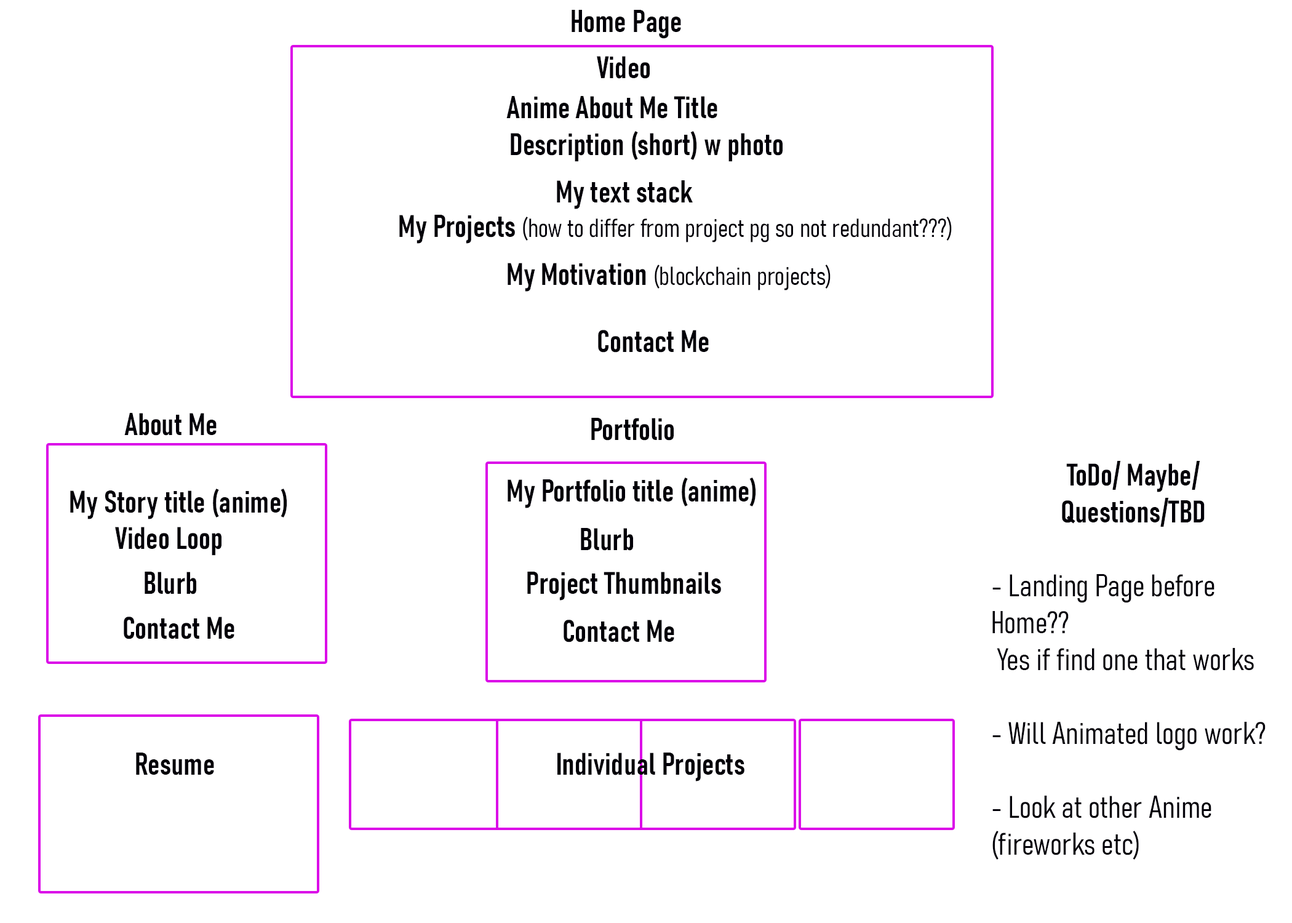
<style>
.page{position:relative;width:1292px;height:923px;background:#ffffff}
.page>*{position:absolute;margin:0}
.t1{font:30.8px "Bahnschrift-SemiBoldCondensed";color:#020008}
.t2{font:25.6px "Bahnschrift-LightCondensed";color:#020008}
.t3{font:30.8px "Bahnschrift-LightCondensed";color:#020008}
</style>
<div class="page">
<p class="t1" style="left:572px;top:10px;width:109px;height:29px">Home Page</p>
<p class="t1" style="left:597px;top:56px;width:53px;height:23px">Video</p>
<p class="t1" style="left:506px;top:96px;width:63px;height:22px">Anime</p>
<p class="t1" style="left:511px;top:96px;width:272px;height:66px;text-align:center">About Me Title<br>Description (short) w photo</p>
<p class="t1" style="left:557px;top:180px;width:136px;height:29px">My text stack</p>
<p class="t2" style="left:399px;top:215px;width:553px;height:29px"><span class="t1">My Projects </span>(how to differ from project pg so not redundant???)</p>
<p class="t2" style="left:508px;top:263px;width:323px;height:29px"><span class="t1">My Motivation </span>(blockchain projects)</p>
<p class="t1" style="left:598px;top:330px;width:111px;height:23px">Contact Me</p>
<p class="t1" style="left:124px;top:413px;width:93px;height:23px">About Me</p>
<p class="t1" style="left:591px;top:418px;width:83px;height:23px">Portfolio</p>
<p class="t3" style="left:992px;top:461px;width:274px;height:399px;text-align:center"><span class="t1">ToDo/ Maybe/ Questions/TBD<br></span><br>- Landing Page before Home??<br> Yes if find one that works<br><br>- Will Animated logo work? <br><br>- Look at other Anime (fireworks etc)<br><br>- Codeflower or blockchain charts?? What works?</p>
<p class="t1" style="left:508px;top:477px;width:248px;height:31px">My Portfolio title (anime)</p>
<p class="t1" style="left:70px;top:489px;width:217px;height:30px">My Story title (anime)</p>
<p class="t1" style="left:115px;top:527px;width:106px;height:29px">Video Loop</p>
<p class="t1" style="left:581px;top:528px;width:52px;height:23px">Blurb</p>
<p class="t1" style="left:145px;top:572px;width:51px;height:22px">Blurb</p>
<p class="t1" style="left:527px;top:572px;width:194px;height:28px">Project Thumbnails</p>
<p class="t1" style="left:124px;top:616px;width:110px;height:23px">Contact Me</p>
<p class="t1" style="left:564px;top:620px;width:110px;height:22px">Contact Me</p>
<p class="t1" style="left:136px;top:752px;width:78px;height:23px">Resume</p>
<p class="t1" style="left:557px;top:752px;width:187px;height:29px">Individual Projects</p>
</div>
